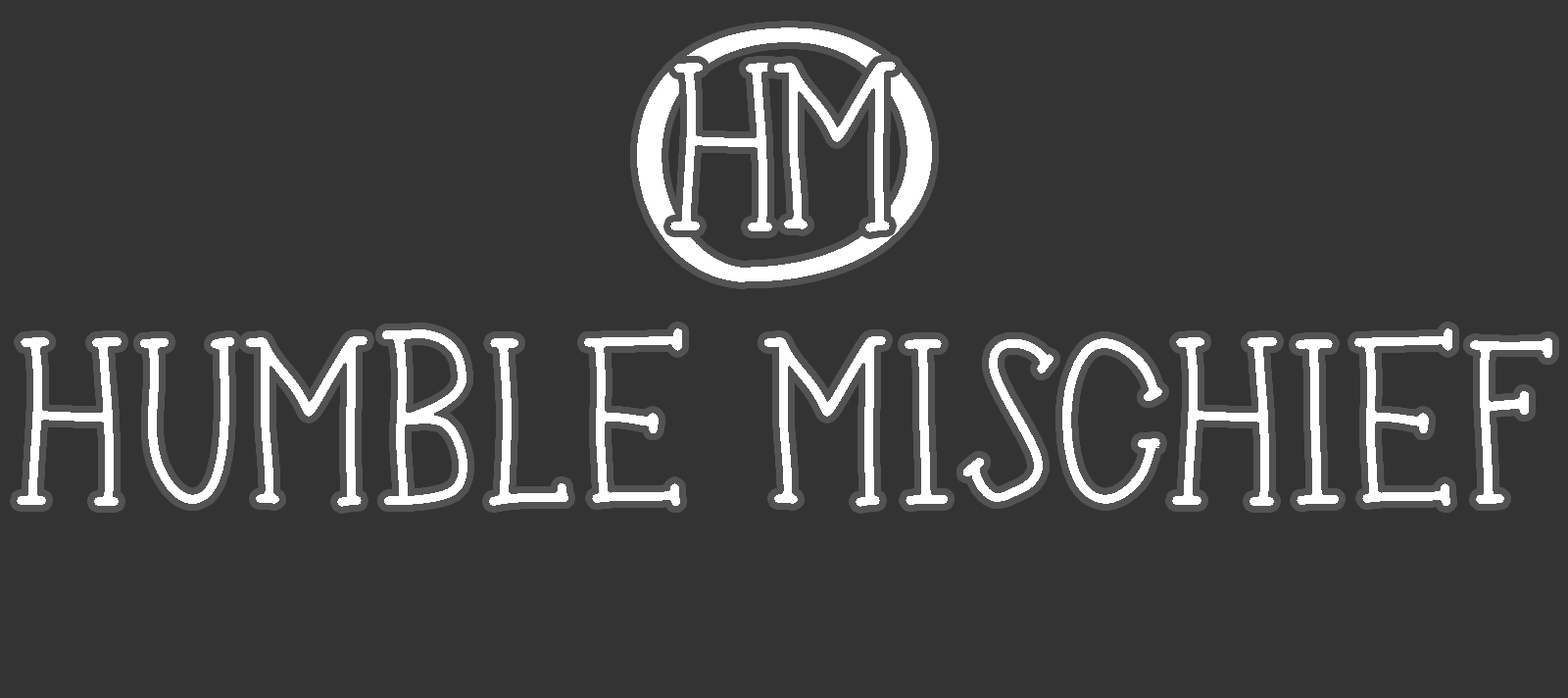
<style>
.page{position:relative;width:1568px;height:698px;background:#333333}
.page>*{position:absolute;margin:0}
.t1{font:355.4px "BeforeBreakfast-Medium";color:#ffffff;scale:1.76 1}
.t2{font:235.2px "BeforeBreakfast-Medium";color:#ffffff}
</style>
<div class="page">
<p class="t1" style="left:637px;top:27px;width:295px;height:255px;rotate:-179deg">O</p>
<p class="t2" style="left:670px;top:63px;width:105px;height:168px">H</p>
<p class="t2" style="left:774px;top:62px;width:122px;height:170px">M</p>
<p class="t2" style="left:17px;top:328px;width:1535px;height:179px">HUMBLE MISCHIEF</p>
</div>
